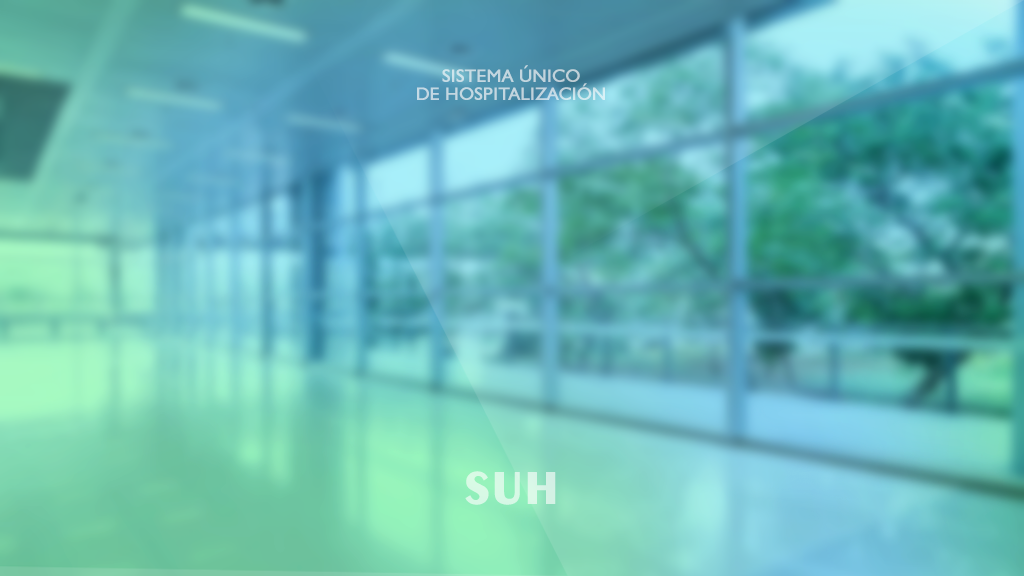
<style>
.page{position:relative;width:1024px;height:576px}
.page>*{position:absolute;margin:0}
.t1{font:18px/18px "Humanist521BT-Roman";color:#c3d7e1;font-weight:bold}
.t2{font:48px "Exotic350BT-Bold";color:#d7f8e5;font-weight:bold}
</style>
<div class="page">
<p class="t1" style="left:417px;top:65px;width:188px;height:35px;text-align:center">SISTEMA ÚNICO<br>DE HOSPITALIZACIÓN</p>
<p class="t2" style="left:465px;top:471px;width:91px;height:34px">SUH</p>
</div>
